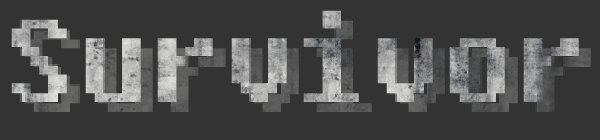
<style>
.page{position:relative;width:600px;height:140px;background:#333333}
.page>*{position:absolute;margin:0}
.t1{font:116.9px "Fixedsys"}
</style>
<div class="page">
<p class="t1" style="left:11px;top:10px;width:568px;height:92px">Survivor</p>
</div>
